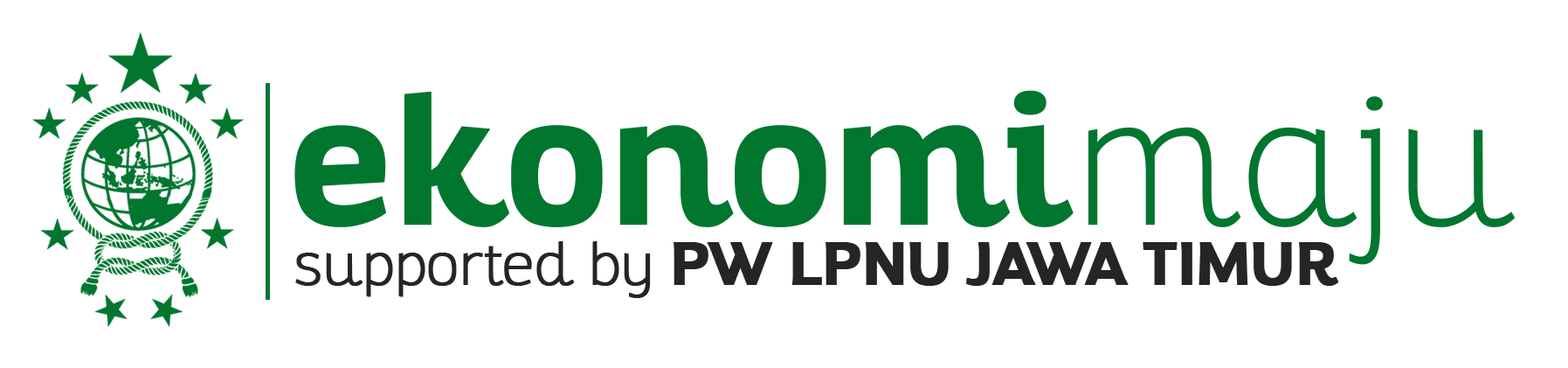
<style>
.page{position:relative;width:1568px;height:368px;background:#ffffff}
.page>*{position:absolute;margin:0}
.t1{font:181.5px "Altair-Bold";letter-spacing:-0.01em;color:#01762f;font-weight:bold}
.t2{font:181.5px "Altair-Thin";letter-spacing:-0.01em;color:#01762f;font-weight:bold}
.t3{font:58.9px "Altair-Bold";letter-spacing:-0.01em;color:#252525;font-weight:bold}
.t4{font:58.9px "Altair-Thin";letter-spacing:-0.01em;color:#252525;font-weight:bold}
</style>
<div class="page">
<p class="t1" style="left:294px;top:90px;width:1222px;height:175px">ekonomi<span class="t2">maju</span></p>
<p class="t3" style="left:295px;top:241px;width:1044px;height:57px"><span class="t4">supported by </span>PW LPNU JAWA TIMUR</p>
</div>
